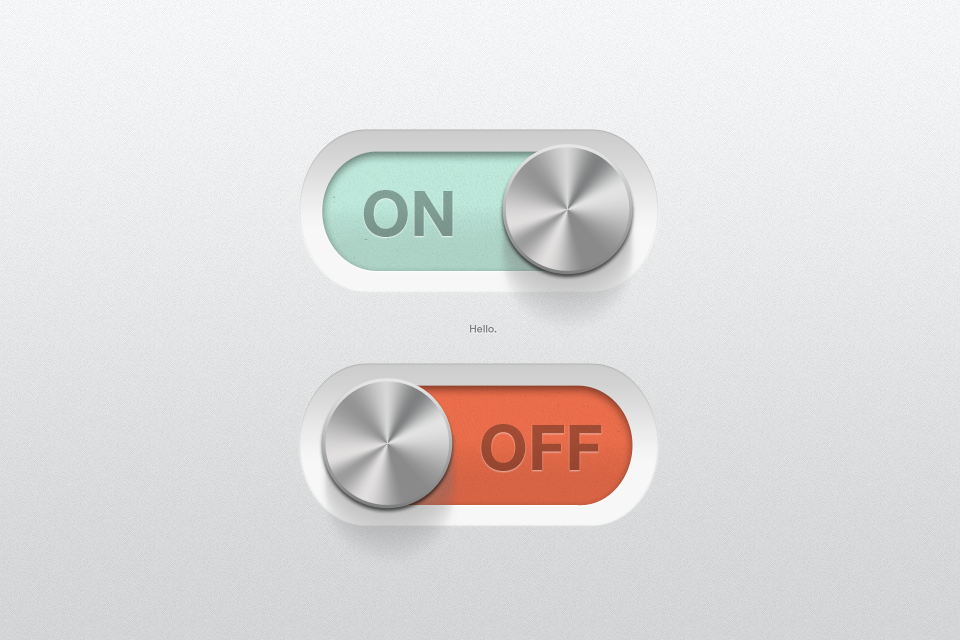
<style>
.page{position:relative;width:960px;height:640px}
.page>*{position:absolute;margin:0}
.t1{font:63.1px "HelveticaNeue-Bold";color:#7e9b92}
.t2{font:10.5px "HelveticaNeue-Medium";color:#7f8081}
.t3{font:63.1px "HelveticaNeue-Bold";color:#9f4a32}
</style>
<div class="page">
<p class="t1" style="left:363px;top:190px;width:90px;height:47px">ON</p>
<p class="t2" style="left:470px;top:325px;width:27px;height:8px">Hello.</p>
<p class="t3" style="left:481px;top:424px;width:121px;height:47px">OFF</p>
</div>
